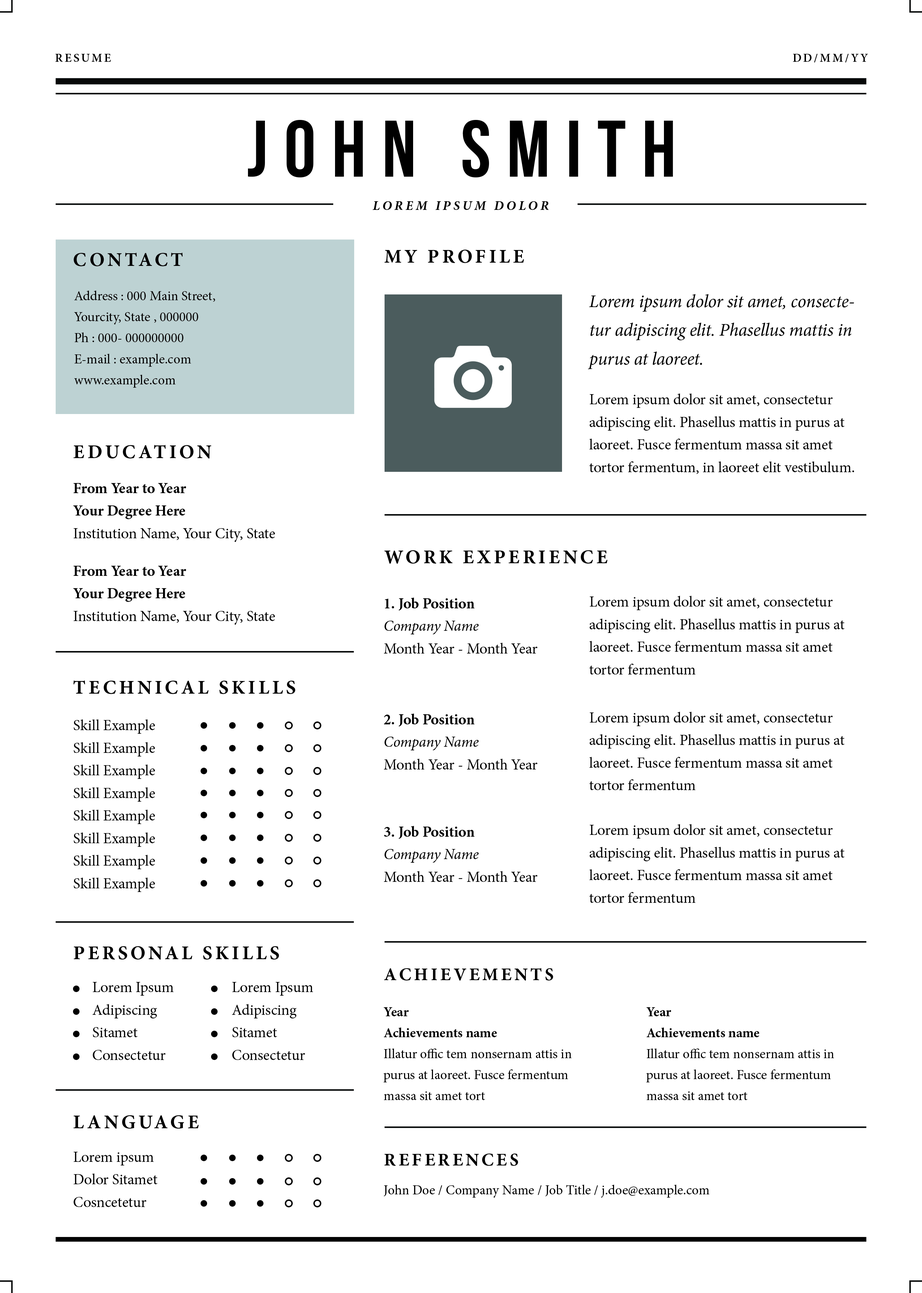
<style>
.page{position:relative;width:922px;height:1293px;background:#ffffff}
.page>*{position:absolute;margin:0}
.t1{font:12px "MinionPro-Semibold";letter-spacing:0.15em;color:#000000}
.t2{font:80.2px "BebasNeueBold";letter-spacing:0.2em;color:#000000}
.t3{font:13.2px "MinionPro-BoldIt";letter-spacing:0.2em;color:#000000}
.t4{font:19.6px "MinionPro-Bold";letter-spacing:0.15em;color:#000000}
.t5{font:13.6px/21.1px "MinionPro-Regular";color:#000000}
.t6{font:18.1px/28.6px "MinionPro-It";color:#000000}
.t7{font:15.1px/22.6px "MinionPro-Regular";color:#000000}
.t8{font:15.1px/22.6px "MinionPro-Bold";color:#000000}
.t9{font:15.1px/22.6px "MinionPro-It";color:#000000}
.t10{font:18.1px "MinionPro-Bold";letter-spacing:0.15em;color:#000000}
.t11{font:13.6px/20.9px "MinionPro-Regular";color:#000000}
.t12{font:13.6px/20.9px "MinionPro-Bold";color:#000000}
.t13{font:13.6px "MinionPro-Regular";color:#000000}
</style>
<div class="page">
<p class="t1" style="left:55px;top:54px;width:56px;height:8px">RESUME</p>
<p class="t1" style="left:793px;top:54px;width:75px;height:9px">DD/MM/YY</p>
<p class="t2" style="left:248px;top:120px;width:425px;height:58px">JOHN SMITH</p>
<p class="t3" style="left:373px;top:201px;width:176px;height:9px">LOREM IPSUM DOLOR</p>
<p class="t4" style="left:74px;top:253px;width:109px;height:13px">CONTACT</p>
<p class="t4" style="left:385px;top:250px;width:139px;height:13px">MY PROFILE</p>
<p class="t5" style="left:74px;top:291px;width:141px;height:97px">Address : 000 Main Street, <br>Yourcity, State , 000000<br>Ph : 000- 000000000<br>E-mail : example.com<br>www.example.com</p>
<p class="t6" style="left:588px;top:294px;width:266px;height:75px">Lorem ipsum dolor sit amet, consectetur adipiscing elit. Phasellus mattis in purus at laoreet.</p>
<p class="t7" style="left:589px;top:394px;width:265px;height:80px">Lorem ipsum dolor sit amet, consectetur adipiscing elit. Phasellus mattis in purus at laoreet. Fusce fermentum massa sit amet tortor fermentum, in laoreet elit vestibulum.</p>
<p class="t4" style="left:73px;top:445px;width:138px;height:14px">EDUCATION</p>
<p class="t8" style="left:73px;top:483px;width:202px;height:59px">From Year to Year<br>Your Degree Here<br><span class="t7">Institution Name, Your City, State</span></p>
<p class="t4" style="left:384px;top:550px;width:224px;height:14px">WORK EXPERIENCE</p>
<p class="t8" style="left:73px;top:566px;width:202px;height:59px">From Year to Year<br>Your Degree Here<br><span class="t7">Institution Name, Your City, State</span></p>
<p class="t7" style="left:384px;top:598px;width:153px;height:56px"><span class="t8">1. Job Position<br></span><span class="t9">Company Name<br></span>Month Year - Month Year</p>
<p class="t7" style="left:589px;top:596px;width:256px;height:79px">Lorem ipsum dolor sit amet, consectetur adipiscing elit. Phasellus mattis in purus at laoreet. Fusce fermentum massa sit amet tortor fermentum</p>
<p class="t4" style="left:73px;top:681px;width:222px;height:13px">TECHNICAL SKILLS</p>
<p class="t7" style="left:384px;top:714px;width:153px;height:56px"><span class="t8">2. Job Position<br></span><span class="t9">Company Name<br></span>Month Year - Month Year</p>
<p class="t7" style="left:589px;top:712px;width:256px;height:79px">Lorem ipsum dolor sit amet, consectetur adipiscing elit. Phasellus mattis in purus at laoreet. Fusce fermentum massa sit amet tortor fermentum</p>
<p class="t7" style="left:74px;top:720px;width:81px;height:172px;text-align:justify">Skill Example<br>Skill Example<br>Skill Example<br>Skill Example<br>Skill Example<br>Skill Example<br>Skill Example<br>Skill Example</p>
<p class="t7" style="left:384px;top:826px;width:153px;height:56px"><span class="t8">3. Job Position<br></span><span class="t9">Company Name<br></span>Month Year - Month Year</p>
<p class="t7" style="left:589px;top:824px;width:256px;height:79px">Lorem ipsum dolor sit amet, consectetur adipiscing elit. Phasellus mattis in purus at laoreet. Fusce fermentum massa sit amet tortor fermentum</p>
<p class="t4" style="left:74px;top:946px;width:205px;height:14px">PERSONAL SKILLS</p>
<p class="t10" style="left:384px;top:968px;width:169px;height:13px">ACHIEVEMENTS</p>
<p class="t7" style="left:93px;top:982px;width:80px;height:79px;text-align:justify">Lorem Ipsum<br>Adipiscing<br>Sitamet<br>Consectetur</p>
<p class="t7" style="left:232px;top:982px;width:81px;height:79px;text-align:justify">Lorem Ipsum<br>Adipiscing<br>Sitamet<br>Consectetur</p>
<p class="t11" style="left:383px;top:1008px;width:189px;height:92px"><span class="t12">Year<br>Achievements name<br></span>Illatur offic tem nonsernam attis in purus at laoreet. Fusce fermentum massa sit amet tort</p>
<p class="t11" style="left:646px;top:1008px;width:188px;height:92px"><span class="t12">Year<br>Achievements name<br></span>Illatur offic tem nonsernam attis in purus at laoreet. Fusce fermentum massa sit amet tort</p>
<p class="t4" style="left:73px;top:1116px;width:126px;height:13px">LANGUAGE</p>
<p class="t7" style="left:73px;top:1152px;width:85px;height:56px;text-align:justify">Lorem ipsum<br>Dolor Sitamet<br>Cosncetetur</p>
<p class="t10" style="left:384px;top:1154px;width:134px;height:12px">REFERENCES</p>
<p class="t13" style="left:384px;top:1185px;width:325px;height:13px">John Doe / Company Name / Job Title / j.doe@example.com</p>
</div>
